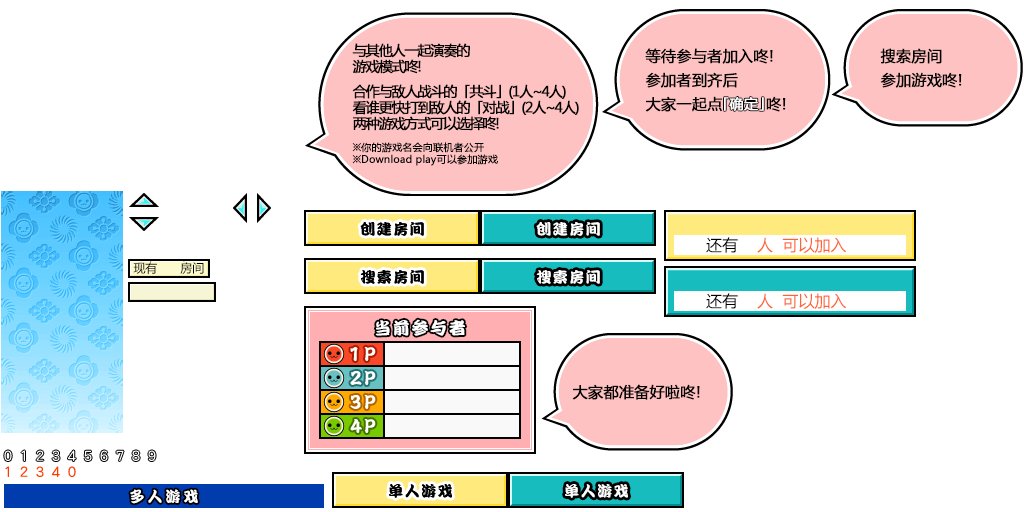
<style>
.page{position:relative;width:1024px;height:512px;background:#ffffff}
.page>*{position:absolute;margin:0}
.t1{font:14px/16px "MicrosoftYaHei";letter-spacing:-0.1em;color:#000000;font-weight:bold}
.t2{font:10px/12px "MicrosoftYaHei";color:#000000;font-weight:bold}
.t3{font:15px/24px "MicrosoftYaHei";color:#000000;font-weight:bold}
.t4{font:14px "MicrosoftYaHei";color:#ffffff;font-weight:bold}
.t5{font:15px "DFPKanTingLiuW9";letter-spacing:0.1em;color:#000000}
.t6{font:15px "DFPKanTingLiuW9";letter-spacing:0.1em;color:#ffffff}
.t7{font:16px "MicrosoftYaHei";color:#ff6333}
.t8{font:16px "MicrosoftYaHei";color:#000000}
.t9{font:12px "MicrosoftYaHei";color:#000000}
.t10{font:17px "DFPKanTingLiuW9";letter-spacing:0.1em;color:#ffffff}
.t11{font:15px "MicrosoftYaHei";color:#000000;font-weight:bold}
.t12{font:15px "DFPKanTingLiuW9";letter-spacing:0.2em;color:#ffffff}
</style>
<div class="page">
<p class="t1" style="left:352px;top:43px;width:227px;height:123px">与其他人一起演奏的<br>游戏模式咚!<br><br>合作与敌人战斗的「共斗」(1人~4人)<br>看谁更快打到敌人的「对战」(2人~4人)<br>两种游戏方式可以选择咚!<br><br><span class="t2">※你的游戏名会向联机者公开<br>※Download play可以参加游戏</span></p>
<p class="t3" style="left:645px;top:48px;width:141px;height:64px">等待参与者加入咚!<br>参加者到齐后<br>大家一起点         咚!</p>
<p class="t3" style="left:880px;top:48px;width:82px;height:40px">搜索房间<br>参加游戏咚!</p>
<p class="t4" style="left:724px;top:97px;width:40px;height:14px">「确定」</p>
<p class="t5" style="left:360px;top:222px;width:64px;height:14px">创建房间</p>
<p class="t5" style="left:360px;top:222px;width:64px;height:14px">创建房间</p>
<p class="t6" style="left:536px;top:222px;width:64px;height:14px">创建房间</p>
<p class="t7" style="left:706px;top:237px;width:141px;height:16px"><span class="t8">还有    </span>人  可以加入</p>
<p class="t9" style="left:133px;top:262px;width:24px;height:12px">现有</p>
<p class="t9" style="left:180px;top:262px;width:24px;height:12px">房间</p>
<p class="t5" style="left:360px;top:270px;width:64px;height:14px">搜索房间</p>
<p class="t5" style="left:360px;top:270px;width:64px;height:14px">搜索房间</p>
<p class="t6" style="left:536px;top:270px;width:64px;height:14px">搜索房间</p>
<p class="t7" style="left:706px;top:293px;width:141px;height:16px"><span class="t8">还有    </span>人  可以加入</p>
<p class="t10" style="left:375px;top:319px;width:90px;height:17px">当前参与者</p>
<p class="t11" style="left:572px;top:384px;width:128px;height:16px">大家都准备好啦咚!</p>
<p class="t5" style="left:389px;top:484px;width:63px;height:14px">单人游戏</p>
<p class="t5" style="left:389px;top:484px;width:63px;height:14px">单人游戏</p>
<p class="t6" style="left:565px;top:484px;width:63px;height:14px">单人游戏</p>
<p class="t12" style="left:130px;top:489px;width:68px;height:15px">多人游戏</p>
</div>
